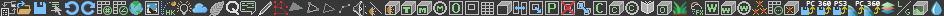
<style>
.page{position:relative;width:944px;height:16px;background:#383838}
.page>*{position:absolute;margin:0}
.t1{font:8px "Consolas";color:#ffffff}
</style>
<div class="page">
<p class="t1" style="left:818px;top:1px;width:13px;height:5px">360</p>
<p class="t1" style="left:834px;top:1px;width:13px;height:5px">PS3</p>
<p class="t1" style="left:867px;top:1px;width:13px;height:5px">360</p>
</div>
